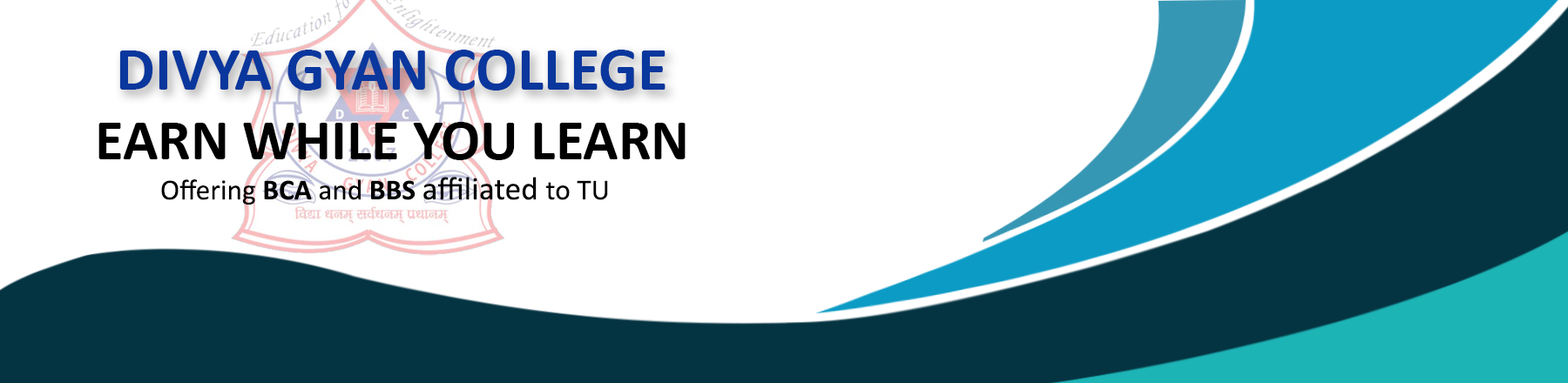
<style>
.page{position:relative;width:1568px;height:383px;background:#ffffff}
.page>*{position:absolute;margin:0}
.t1{font:61.7px "Calibri-Bold";color:#0a379d}
.t2{font:58.1px "Calibri-Bold";color:#000000}
.t3{font:32.7px "Calibri";color:#000000}
.t4{font:29px "Calibri";color:#000000}
.t5{font:29px "Calibri-Bold";color:#000000}
</style>
<div class="page">
<p class="t1" style="left:119px;top:50px;width:547px;height:41px">DIVYA GYAN COLLEGE</p>
<p class="t2" style="left:98px;top:122px;width:588px;height:38px">EARN WHILE YOU LEARN</p>
<p class="t3" style="left:161px;top:177px;width:447px;height:28px"><span class="t4">Offering </span><span class="t5">BCA</span><span class="t4"> and </span><span class="t5">BBS </span>affiliated <span class="t4">to TU</span></p>
</div>
